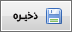
<style>
.page{position:relative;width:72px;height:32px}
.page>*{position:absolute;margin:0}
.t1{font:12px "Mj_CasablancaLight";color:#030000}
</style>
<div class="page">
<p class="t1" style="left:13px;top:11px;width:25px;height:11px">ذخیـره</p>
</div>
